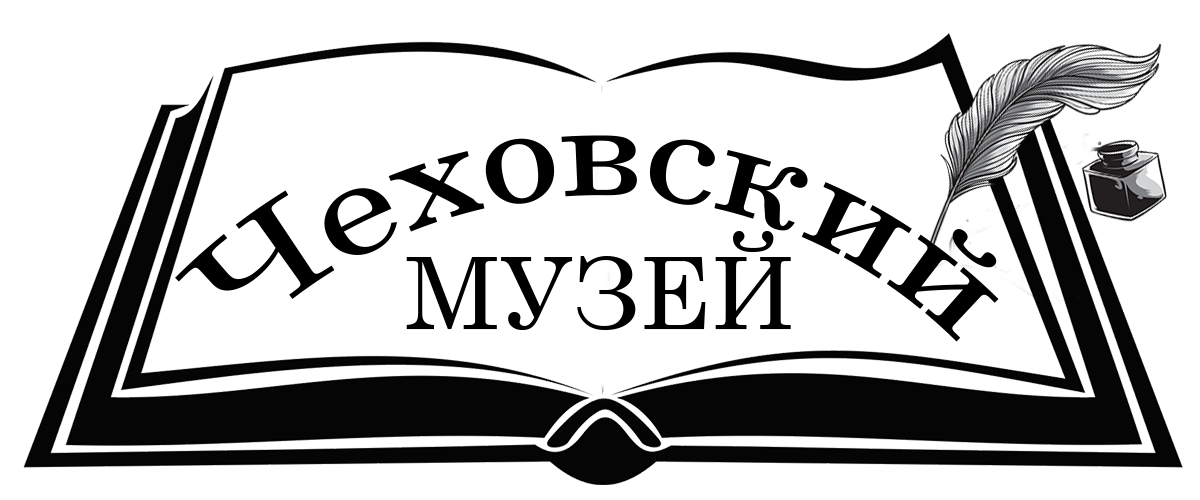
<style>
.page{position:relative;width:1200px;height:500px;background:#ffffff}
.page>*{position:absolute;margin:0}
.t1{font:129.6px "CenturySchoolbook";color:#000000}
.t2{font:100.1px "CenturySchoolbook";color:#000000}
</style>
<div class="page">
<p class="t1" style="left:175px;top:135px;width:824px;height:207px">Чеховский</p>
<p class="t2" style="left:406px;top:231px;width:385px;height:99px">МУЗЕЙ</p>
</div>
